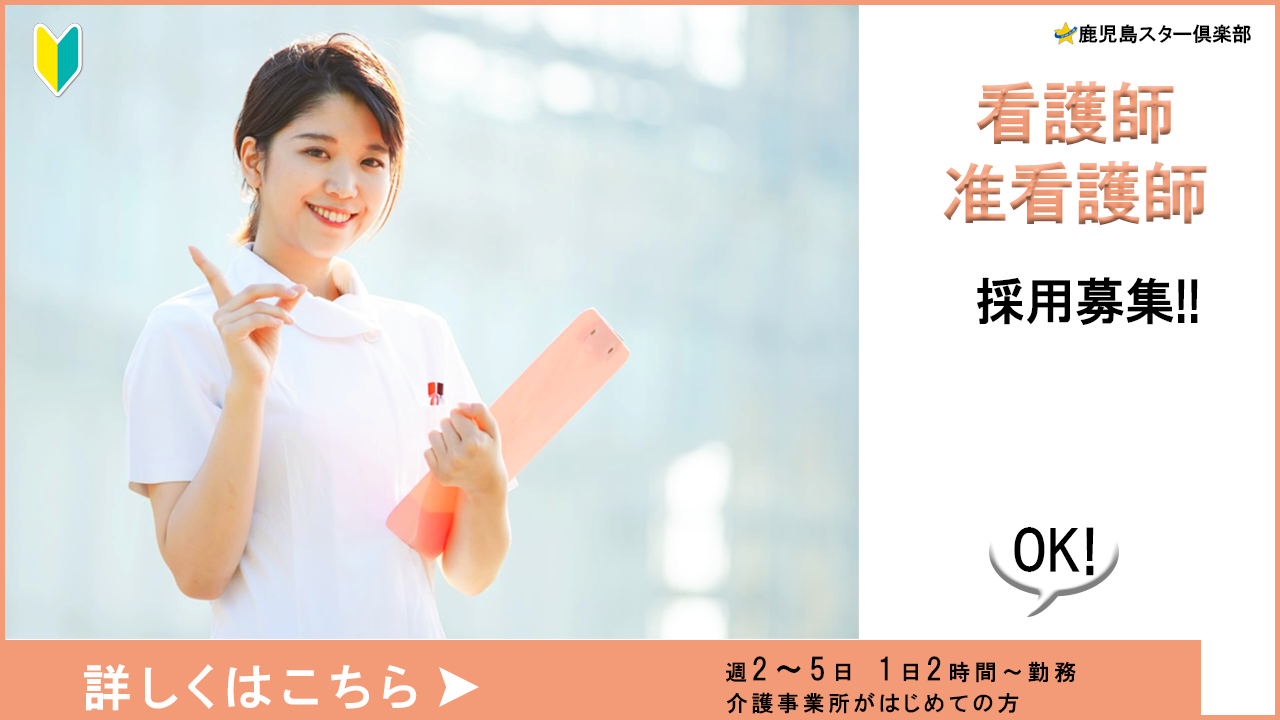
<style>
.page{position:relative;width:1280px;height:720px;background:#ffffff}
.page>*{position:absolute;margin:0}
.t1{font:20px "HGPGothicE";color:#000000}
.t2{font:67px/80px "HGPGothicE";color:#f29b76}
.t3{font:50px "HGPGothicE";color:#000000}
.t4{font:55px "HGPGothicE";color:#000000}
.t5{font:50px "HGPGothicE";letter-spacing:0.16em;color:#ffffff}
.t6{font:22px "HGPGothicE";letter-spacing:0.2em;color:#000000}
.t7{font:30px "HGPGothicE";letter-spacing:0.2em;color:#000000}
.t8{font:22px "HGPGothicE";letter-spacing:0.16em;color:#000000}
</style>
<div class="page">
<p class="t1" style="left:1078px;top:24px;width:173px;height:20px">鹿児島スター倶楽部</p>
<p class="t2" style="left:943px;top:81px;width:264px;height:144px;text-align:center">看護師 准看護師</p>
<p class="t3" style="left:977px;top:277px;width:221px;height:48px">採用募集!!</p>
<p class="t4" style="left:1014px;top:527px;width:80px;height:49px">OK!</p>
<p class="t5" style="left:84px;top:664px;width:333px;height:47px">詳しくはこちら</p>
<p class="t6" style="left:726px;top:656px;width:350px;height:27px">週<span class="t7">2～5</span>日　<span class="t7">1</span>日<span class="t7">2</span>時間～勤務</p>
<p class="t8" style="left:726px;top:692px;width:293px;height:22px">介護事業所がはじめての方</p>
</div>
